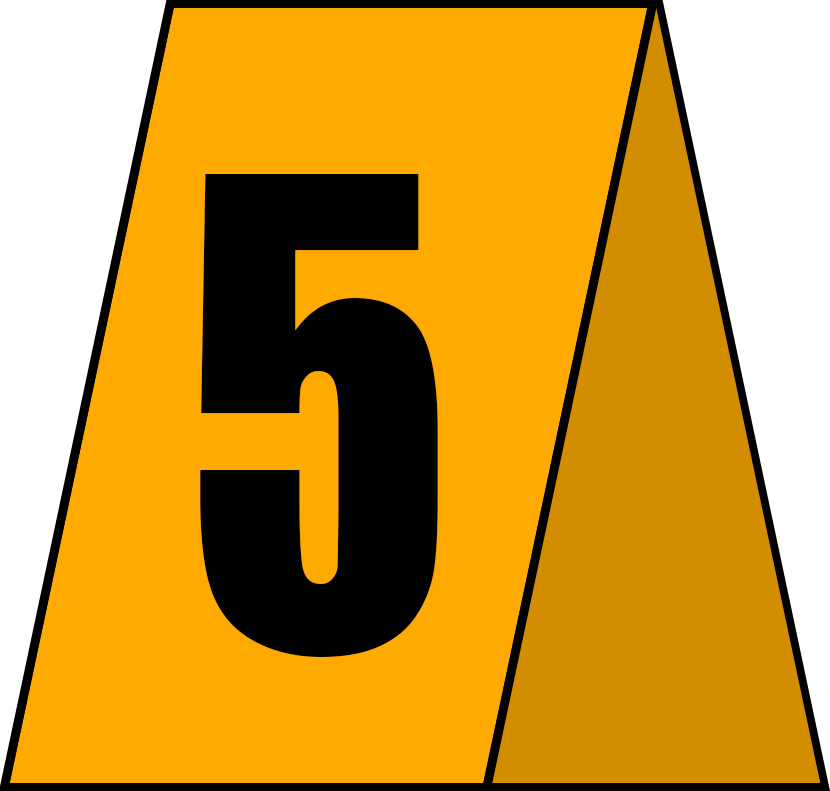
<style>
.page{position:relative;width:830px;height:791px;background:#ffaa00}
.page>*{position:absolute;margin:0}
.t1{font:598.8px "Impact";color:#000000;scale:0.84 1}
</style>
<div class="page">
<p class="t1" style="left:200px;top:174px;width:238px;height:483px">5</p>
</div>
